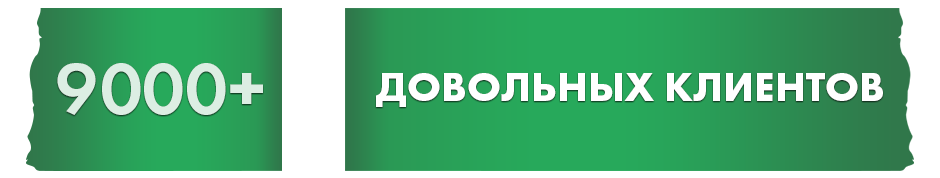
<style>
.page{position:relative;width:940px;height:178px;background:#ffffff}
.page>*{position:absolute;margin:0}
.t1{font:75px "FuturaPT-Demi";color:#dceee3;text-transform:uppercase}
.t2{font:41.7px "FuturaPT-Bold";color:#ffffff;text-transform:uppercase}
</style>
<div class="page">
<p class="t1" style="left:57px;top:63px;width:206px;height:52px">9000+</p>
<p class="t2" style="left:376px;top:73px;width:507px;height:34px">довольных клиентов</p>
</div>
